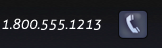
<style>
.page{position:relative;width:162px;height:48px}
.page>*{position:absolute;margin:0}
.t1{font:14px "Aller-LightItalic";color:#ffffff}
</style>
<div class="page">
<p class="t1" style="left:2px;top:18px;width:100px;height:12px">1.800.555.1213</p>
</div>
